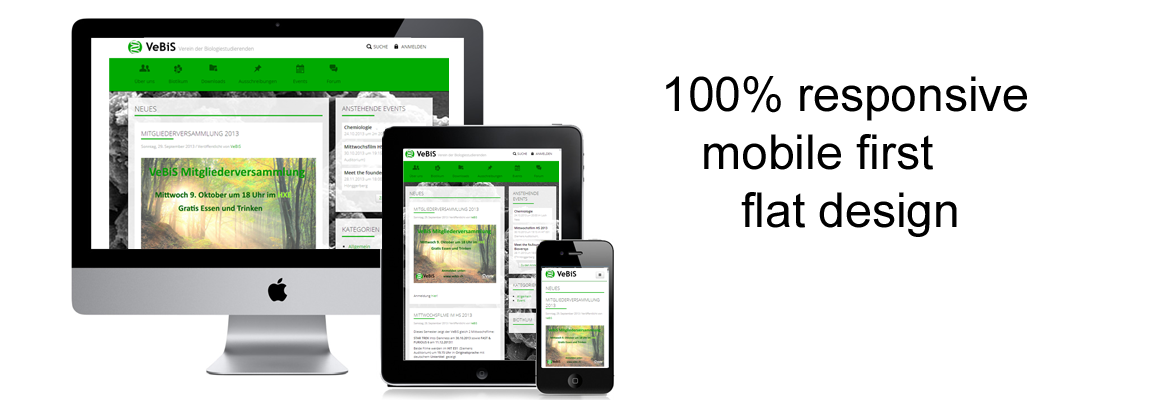
<style>
.page{position:relative;width:1171px;height:400px;background:#ffffff}
.page>*{position:absolute;margin:0}
.t1{font:48px "ArialMT";color:#000000}
</style>
<div class="page">
<p class="t1" style="left:666px;top:76px;width:361px;height:161px">100% responsive<br>   mobile first<br>      flat design</p>
</div>
